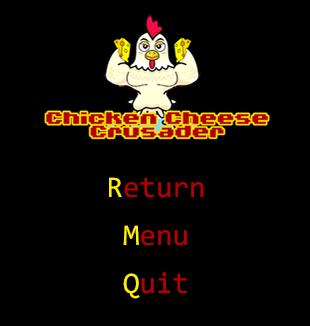
<style>
.page{position:relative;width:310px;height:326px;background:#000000}
.page>*{position:absolute;margin:0}
.t1{font:30px "Consolas";color:#b40001}
.t2{font:30px "Consolas";color:#ffee05}
</style>
<div class="page">
<p class="t1" style="left:109px;top:177px;width:95px;height:122px;text-align:center"><span class="t2">R</span>eturn<br><br><span class="t2">M</span>enu<br><br><span class="t2">Q</span>uit</p>
</div>
